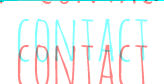
<style>
.page{position:relative;width:164px;height:84px;background:#ffffff}
.page>*{position:absolute;margin:0}
.t1{font:63px "AmaticSC-Regular";color:#84ffff}
</style>
<div class="page">
<p class="t1" style="left:17px;top:17px;width:131px;height:45px">contact</p>
</div>
